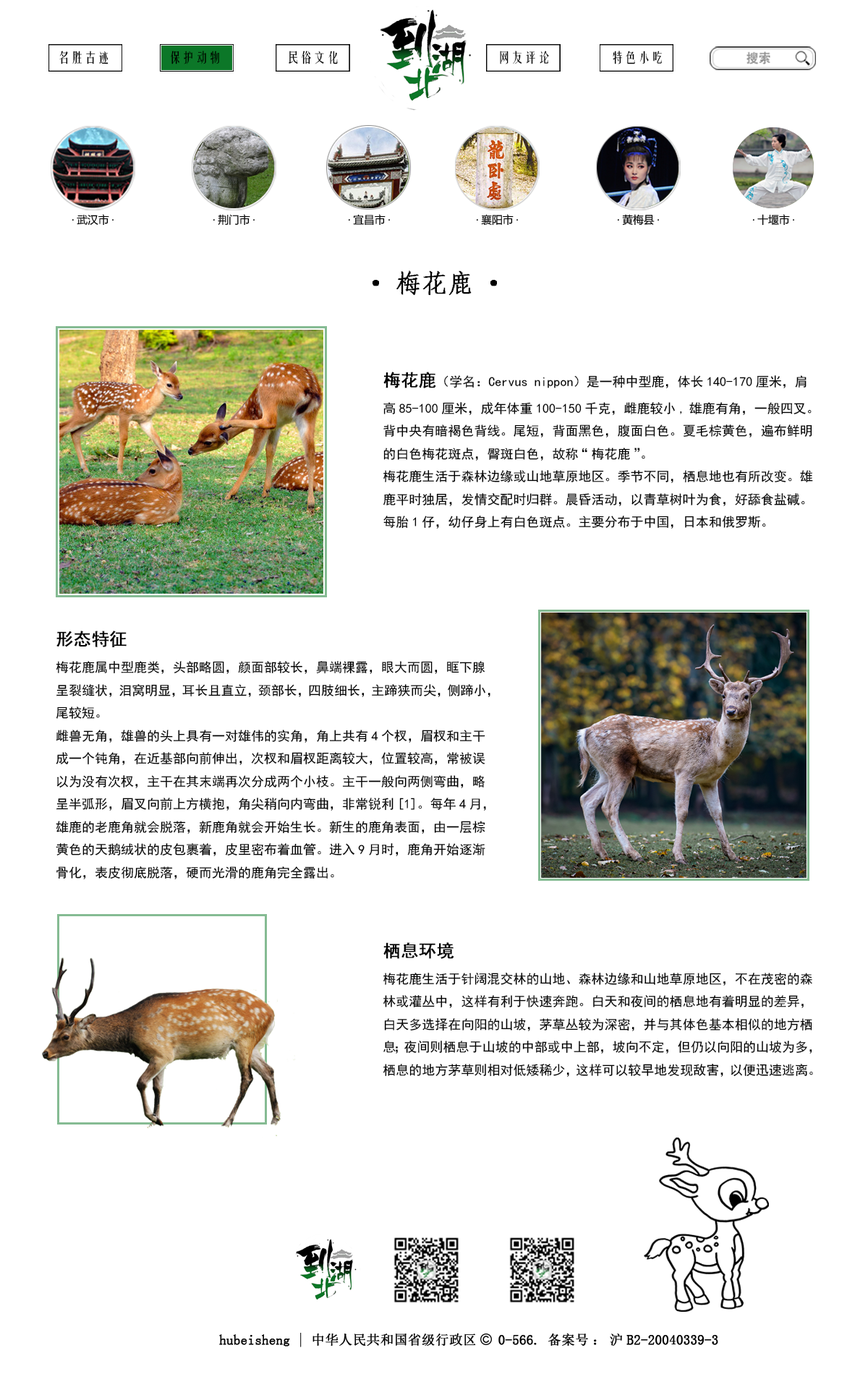
<style>
.page{position:relative;width:868px;height:1374px;background:#ffffff}
.page>*{position:absolute;margin:0}
.t1{font:13.3px "FZYTK--GBK1-0";color:#000000}
.t2{font:26px "·ÂËÎ";color:#000000;font-weight:bold}
.t3{font:13px "SimHei";color:#000000}
.t4{font:17.4px "SimHei";color:#000000;font-weight:bold}
</style>
<div class="page">
<p class="t1" style="left:59px;top:51px;width:49px;height:13px">名胜古迹</p>
<p class="t1" style="left:171px;top:51px;width:48px;height:13px">保护动物</p>
<p class="t1" style="left:289px;top:51px;width:49px;height:13px">民俗文化</p>
<p class="t1" style="left:500px;top:51px;width:49px;height:13px">网友评论</p>
<p class="t1" style="left:613px;top:51px;width:49px;height:13px">特色小吃</p>
<p class="t2" style="left:372px;top:270px;width:125px;height:25px">·梅花鹿·</p>
<p class="t3" style="left:383px;top:372px;width:430px;height:157px"><span class="t4">梅花鹿</span>（学名：Cervus nippon）是一种中型鹿，体长140-170厘米，肩高85-100厘米，成年体重100-150千克，雌鹿较小,雄鹿有角，一般四叉。背中央有暗褐色背线。尾短，背面黑色，腹面白色。夏毛棕黄色，遍布鲜明的白色梅花斑点，臀斑白色，故称“梅花鹿”。<br>梅花鹿生活于森林边缘或山地草原地区。季节不同，栖息地也有所改变。雄鹿平时独居，发情交配时归群。晨昏活动，以青草树叶为食，好舔食盐碱。每胎1仔，幼仔身上有白色斑点。主要分布于中国，日本和俄罗斯。</p>
<p class="t3" style="left:56px;top:631px;width:434px;height:248px"><span class="t4">形态特征</span><br>梅花鹿属中型鹿类，头部略圆，颜面部较长，鼻端裸露，眼大而圆，眶下腺呈裂缝状，泪窝明显，耳长且直立，颈部长，四肢细长，主蹄狭而尖，侧蹄小，尾较短。<br>雌兽无角，雄兽的头上具有一对雄伟的实角，角上共有4个杈，眉杈和主干成一个钝角，在近基部向前伸出，次杈和眉杈距离较大，位置较高，常被误以为没有次杈，主干在其末端再次分成两个小枝。主干一般向两侧弯曲，略呈半弧形，眉叉向前上方横抱，角尖稍向内弯曲，非常锐利[1]。每年4月，雄鹿的老鹿角就会脱落，新鹿角就会开始生长。新生的鹿角表面，由一层棕黄色的天鹅绒状的皮包裹着，皮里密布着血管。进入9月时，鹿角开始逐渐骨化，表皮彻底脱落，硬而光滑的鹿角完全露出。</p>
<p class="t3" style="left:383px;top:942px;width:430px;height:135px"><span class="t4">栖息环境<br></span>梅花鹿生活于针阔混交林的山地、森林边缘和山地草原地区，不在茂密的森林或灌丛中，这样有利于快速奔跑。白天和夜间的栖息地有着明显的差异，白天多选择在向阳的山坡，茅草丛较为深密，并与其体色基本相似的地方栖息；夜间则栖息于山坡的中部或中上部，坡向不定，但仍以向阳的山坡为多，栖息的地方茅草则相对低矮稀少，这样可以较早地发现敌害，以便迅速逃离。</p>
</div>
